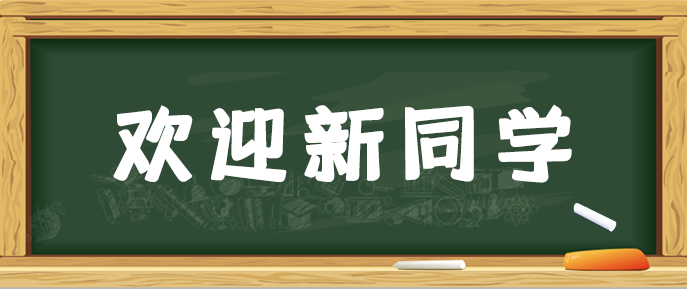
<style>
.page{position:relative;width:687px;height:289px;background:#2f4b35}
.page>*{position:absolute;margin:0}
.t1{font:93.1px "zihun70hao-lingyueheiti";color:#ffffff;text-transform:uppercase;font-weight:bold}
</style>
<div class="page">
<p class="t1" style="left:113px;top:104px;width:459px;height:79px">欢迎新同学</p>
</div>
